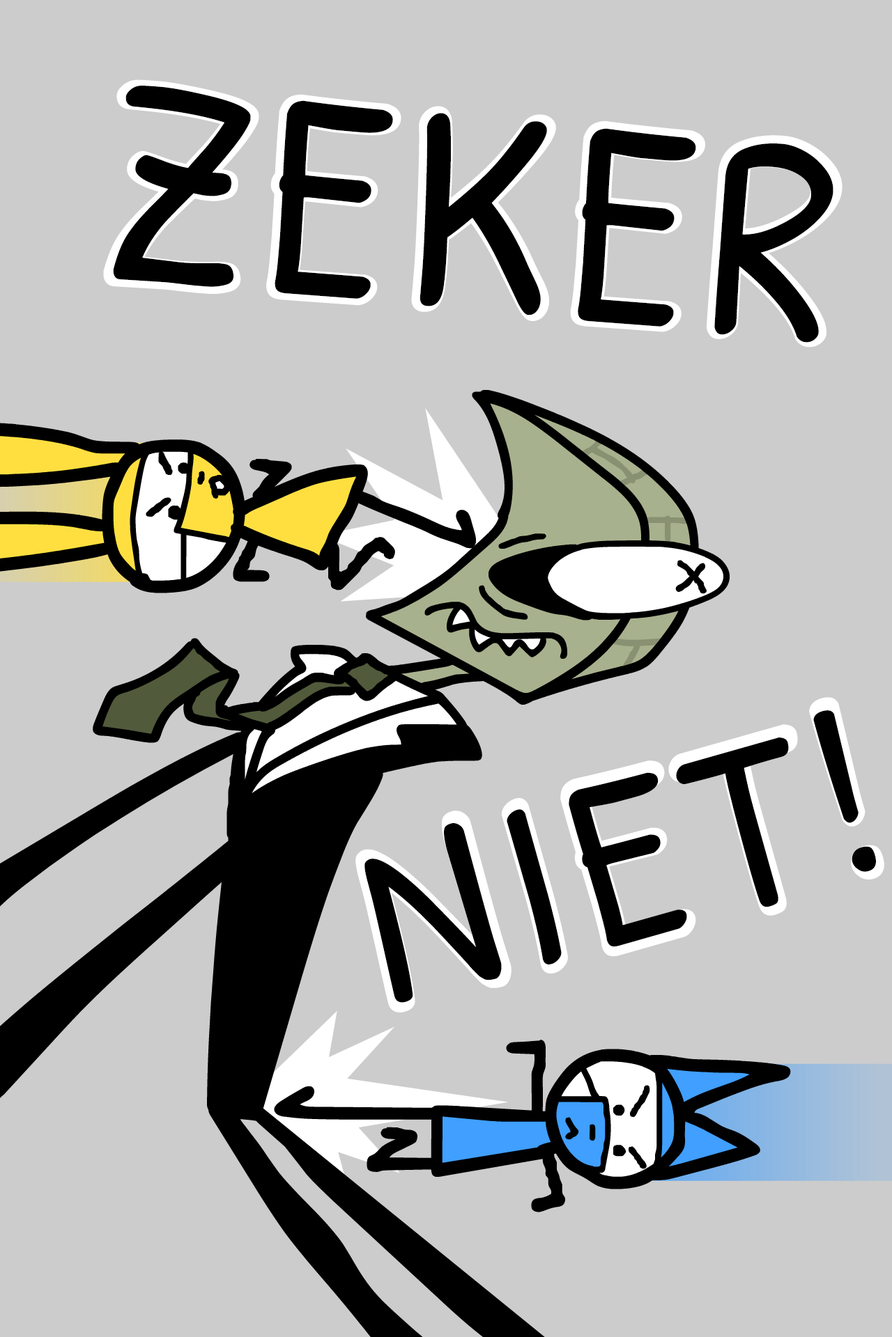
<style>
.page{position:relative;width:892px;height:1337px;background:#cccccc}
.page>*{position:absolute;margin:0}
.t1{font:299.5px "PatrickHand-Regular";font-weight:bold}
.t2{font:292.3px "PatrickHand-Regular";letter-spacing:0.063em;color:#000000;scale:0.95 1}
.t3{font:264.7px "PatrickHand-Regular";font-weight:bold}
.t4{font:243.8px "PatrickHand-Regular";letter-spacing:0.06em;color:#000000}
</style>
<div class="page">
<p class="t1" style="left:103px;top:79px;width:739px;height:269px;rotate:5deg">ZEKER</p>
<p class="t2" style="left:113px;top:86px;width:720px;height:257px;rotate:5deg">ZEKER</p>
<p class="t3" style="left:355px;top:697px;width:529px;height:316px;rotate:-15deg">NIET!</p>
<p class="t4" style="left:364px;top:710px;width:512px;height:293px;rotate:-15deg">NIET!</p>
</div>
